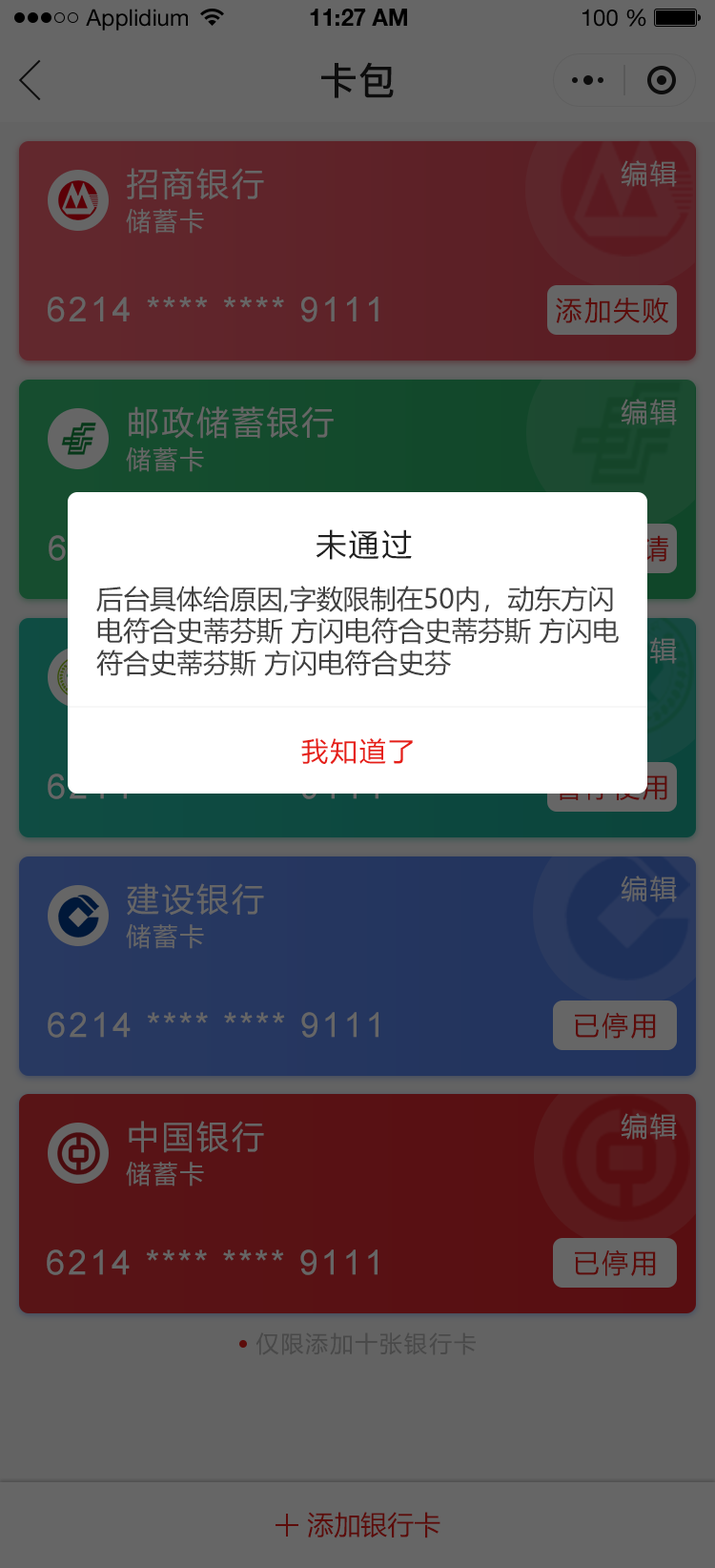
<style>
.page{position:relative;width:715px;height:1568px}
.page>*{position:absolute;margin:0}
.t1{font:22.9px "HelveticaNeueLTStd-Roman";color:#000000}
.t2{font:22.9px "HelveticaNeueLTStd-Bd";color:#000000}
.t3{font:38.2px "PingFang-SC-Bold";color:#202020;text-transform:uppercase}
.t4{font:26.7px "MicrosoftYaHei";letter-spacing:0.08em;color:#666666}
.t5{font:32.4px "MicrosoftYaHei";letter-spacing:0.08em;color:#666666}
.t6{font:24.8px "MicrosoftYaHei";letter-spacing:0.08em;color:#666666}
.t7{font:34.3px "ArialMT";letter-spacing:0.08em;color:#666666}
.t8{font:26.7px "MicrosoftYaHei";letter-spacing:0.08em;color:#5c0c0a}
.t9{font:30.5px "MicrosoftYaHei";letter-spacing:0.08em;color:#202020}
.t10{font:26.7px "MicrosoftYaHei";color:#404040}
.t11{font:26.7px "MicrosoftYaHei";letter-spacing:0.08em;color:#e61f18}
.t12{font:22.9px "MicrosoftYaHei";letter-spacing:0.08em;color:#494949}
.t13{font:26.7px "MicrosoftYaHei";color:#5c0c0a;text-transform:uppercase}
</style>
<div class="page">
<p class="t1" style="left:86px;top:9px;width:102px;height:22px">Applidium</p>
<p class="t2" style="left:310px;top:9px;width:97px;height:17px">11:27 AM</p>
<p class="t1" style="left:583px;top:9px;width:64px;height:18px">100 %</p>
<p class="t3" style="left:321px;top:62px;width:73px;height:36px">卡包</p>
<p class="t4" style="left:621px;top:160px;width:56px;height:27px">编辑</p>
<p class="t5" style="left:127px;top:168px;width:137px;height:32px">招商银行</p>
<p class="t6" style="left:126px;top:209px;width:78px;height:25px">储蓄卡</p>
<p class="t7" style="left:48px;top:297px;width:331px;height:25px">6214 **** **** 9111</p>
<p class="t8" style="left:556px;top:298px;width:114px;height:26px">添加失败</p>
<p class="t4" style="left:621px;top:399px;width:56px;height:26px">编辑</p>
<p class="t5" style="left:129px;top:406px;width:205px;height:33px">邮政储蓄银行</p>
<p class="t6" style="left:126px;top:447px;width:78px;height:25px">储蓄卡</p>
<p class="t9" style="left:316px;top:529px;width:96px;height:31px">未通过</p>
<p class="t10" style="left:96px;top:586px;width:523px;height:90px">后台具体给原因,字数限制在50内，动东方闪<br>电符合史蒂芬斯 方闪电符合史蒂芬斯 方闪电<br>符合史蒂芬斯 方闪电符合史芬</p>
<p class="t11" style="left:301px;top:738px;width:112px;height:27px">我知道了</p>
<p class="t4" style="left:621px;top:876px;width:56px;height:26px">编辑</p>
<p class="t5" style="left:127px;top:883px;width:137px;height:33px">建设银行</p>
<p class="t6" style="left:126px;top:924px;width:78px;height:25px">储蓄卡</p>
<p class="t7" style="left:48px;top:1012px;width:331px;height:26px">6214 **** **** 9111</p>
<p class="t8" style="left:575px;top:1012px;width:81px;height:27px">已停用</p>
<p class="t5" style="left:129px;top:1121px;width:135px;height:32px">中国银行</p>
<p class="t4" style="left:621px;top:1113px;width:56px;height:27px">编辑</p>
<p class="t6" style="left:126px;top:1162px;width:78px;height:24px">储蓄卡</p>
<p class="t7" style="left:47px;top:1249px;width:331px;height:26px">6214 **** **** 9111</p>
<p class="t8" style="left:575px;top:1249px;width:81px;height:27px">已停用</p>
<p class="t12" style="left:256px;top:1332px;width:220px;height:23px">仅限添加十张银行卡</p>
<p class="t13" style="left:307px;top:1512px;width:134px;height:26px">添加银行卡</p>
</div>
